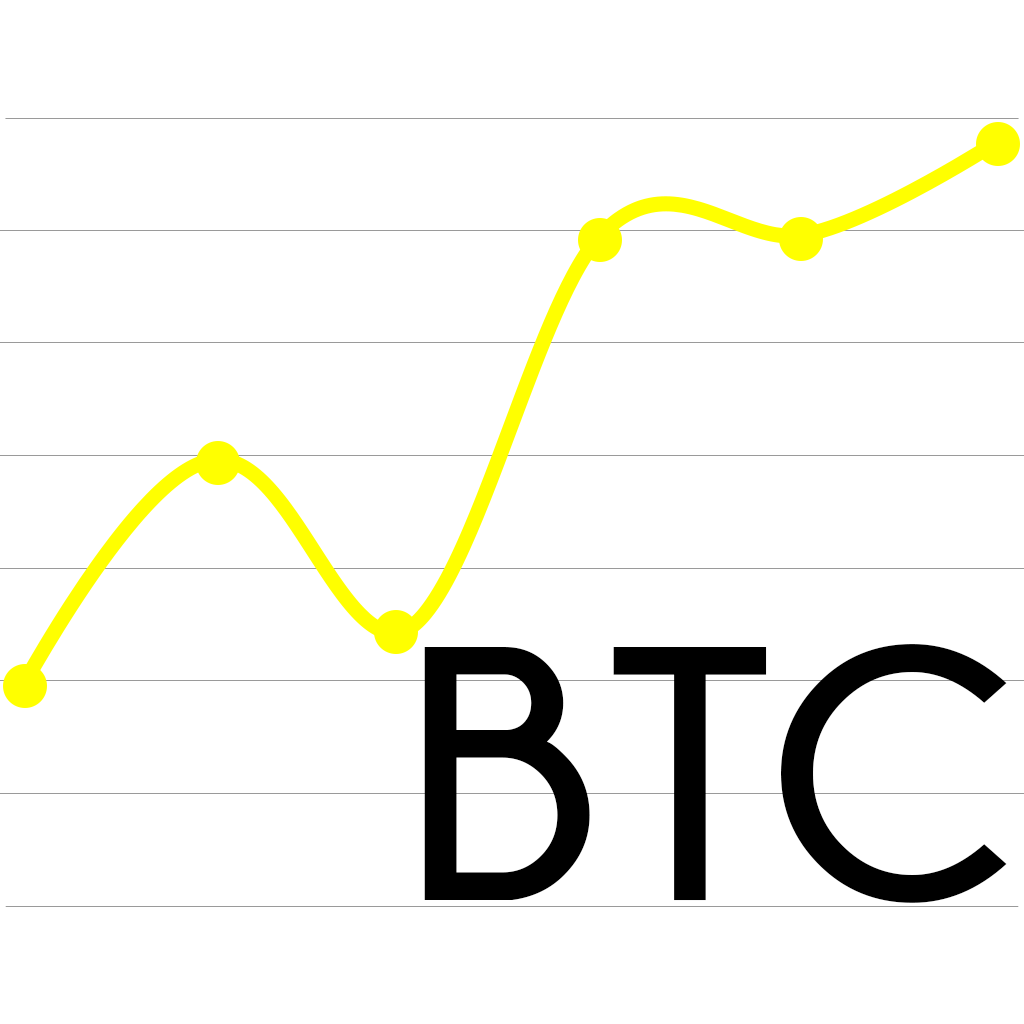
<style>
.page{position:relative;width:1024px;height:1024px;background:#ffffff}
.page>*{position:absolute;margin:0}
.t1{font:360px "Champagne&Limousines-Bold";letter-spacing:0.025em;color:#000000}
</style>
<div class="page">
<p class="t1" style="left:424px;top:644px;width:583px;height:259px">BTC</p>
</div>
